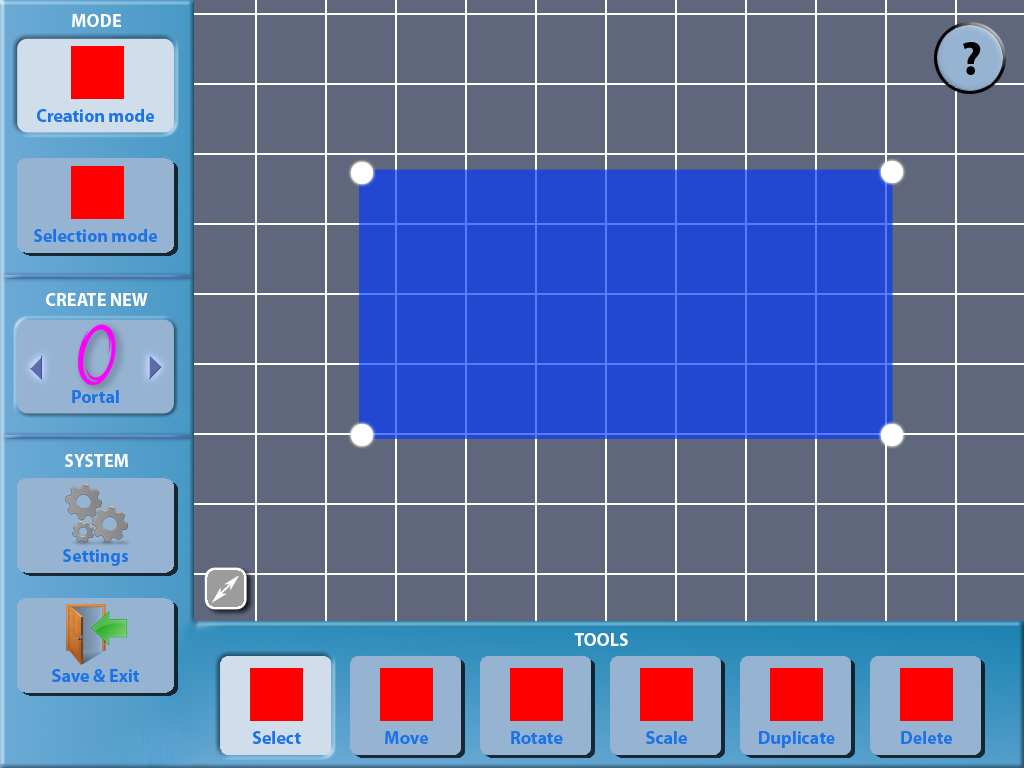
<style>
.page{position:relative;width:1024px;height:768px;background:#60677c}
.page>*{position:absolute;margin:0}
.t1{font:18px "MyriadPro-Bold";color:#ffffff}
.t2{font:48px "MyriadPro-Bold";color:#000000}
.t3{font:18px "MyriadPro-Bold";color:#1c72e7}
</style>
<div class="page">
<p class="t1" style="left:72px;top:14px;width:49px;height:13px">MODE</p>
<p class="t2" style="left:963px;top:42px;width:18px;height:33px">?</p>
<p class="t3" style="left:37px;top:109px;width:117px;height:13px">Creation mode</p>
<p class="t3" style="left:34px;top:229px;width:123px;height:13px">Selection mode</p>
<p class="t1" style="left:46px;top:293px;width:102px;height:13px">CREATE NEW</p>
<p class="t3" style="left:72px;top:390px;width:47px;height:13px">Portal</p>
<p class="t1" style="left:65px;top:454px;width:63px;height:13px">SYSTEM</p>
<p class="t3" style="left:63px;top:549px;width:65px;height:17px">Settings</p>
<p class="t1" style="left:574px;top:633px;width:54px;height:13px">TOOLS</p>
<p class="t3" style="left:52px;top:669px;width:87px;height:13px">Save &amp; Exit</p>
<p class="t3" style="left:252px;top:731px;width:49px;height:13px">Select</p>
<p class="t3" style="left:385px;top:731px;width:43px;height:13px">Move</p>
<p class="t3" style="left:511px;top:731px;width:52px;height:13px">Rotate</p>
<p class="t3" style="left:646px;top:731px;width:41px;height:13px">Scale</p>
<p class="t3" style="left:759px;top:731px;width:76px;height:17px">Duplicate</p>
<p class="t3" style="left:901px;top:731px;width:51px;height:13px">Delete</p>
</div>
